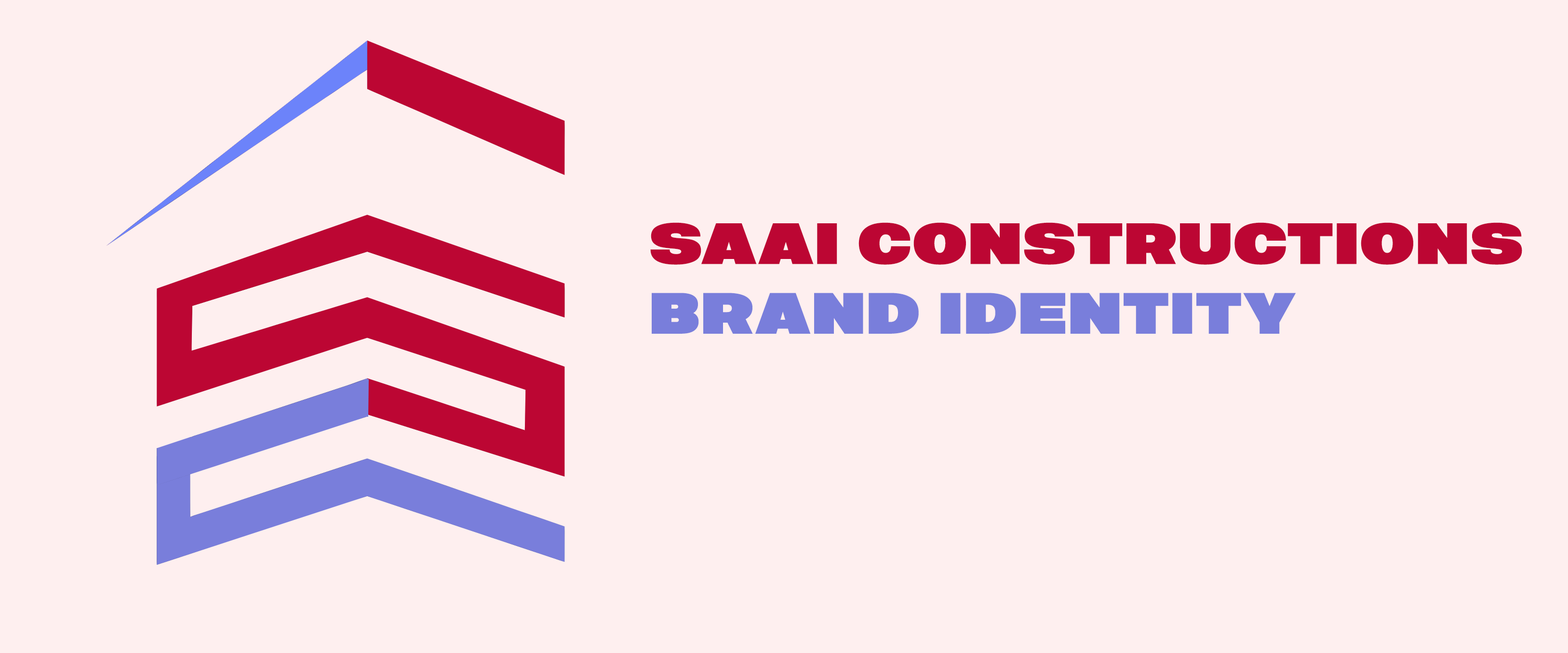
<style>
.page{position:relative;width:1568px;height:653px;background:#feefef}
.page>*{position:absolute;margin:0}
.t1{font:58px "Molde-Expanded-Heavy";color:#bc0633}
.t2{font:58px "Molde-Expanded-Heavy";color:#797edb}
</style>
<div class="page">
<p class="t1" style="left:650px;top:222px;width:872px;height:112px">SAAI CONSTRUCTIONS<br><span class="t2">BRAND IDENTITY</span></p>
</div>
